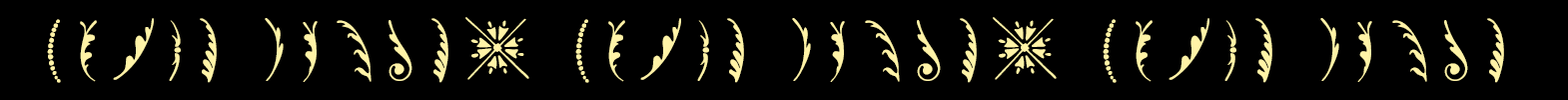
<style>
.page{position:relative;width:1568px;height:100px;background:#000000}
.page>*{position:absolute;margin:0}
.t1{font:64.8px "BodoniOrnamentsITCTT";letter-spacing:0.2em;color:#fff3a7;text-transform:uppercase}
</style>
<div class="page">
<p class="t1" style="left:47px;top:17px;width:1457px;height:66px">Lorem Ipsum, Lorem Ipsum, Lorem Ipsum</p>
</div>
